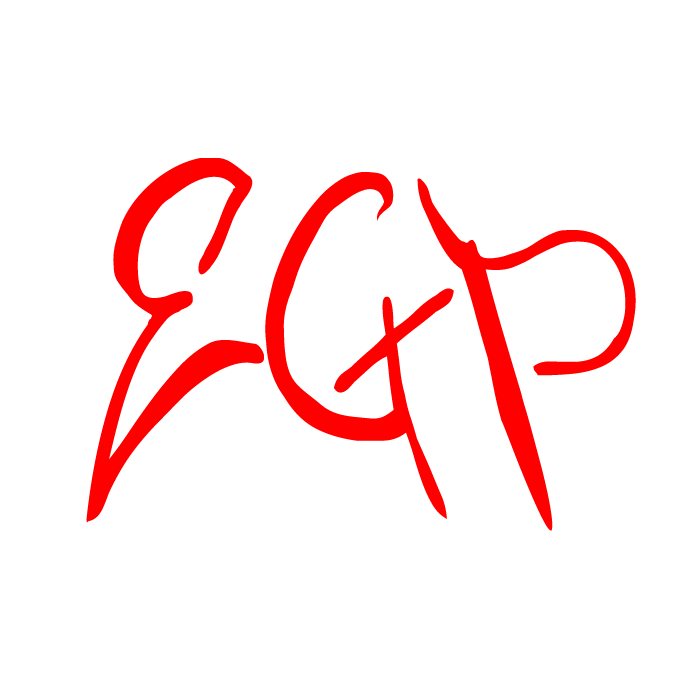
<style>
.page{position:relative;width:700px;height:700px;background:#ffffff}
.page>*{position:absolute;margin:0}
.t1{font:445.5px "NerminsGraffiti";color:#ff0000;scale:0.68 1}
.t2{font:441.3px "NerminsGraffiti";color:#ff0000;scale:0.64 1}
.t3{font:442.1px "NerminsGraffiti";color:#ff0000;scale:0.77 1}
</style>
<div class="page">
<p class="t1" style="left:86px;top:158px;width:178px;height:365px">E</p>
<p class="t2" style="left:265px;top:172px;width:189px;height:347px">G</p>
<p class="t3" style="left:417px;top:178px;width:219px;height:353px">P</p>
</div>
